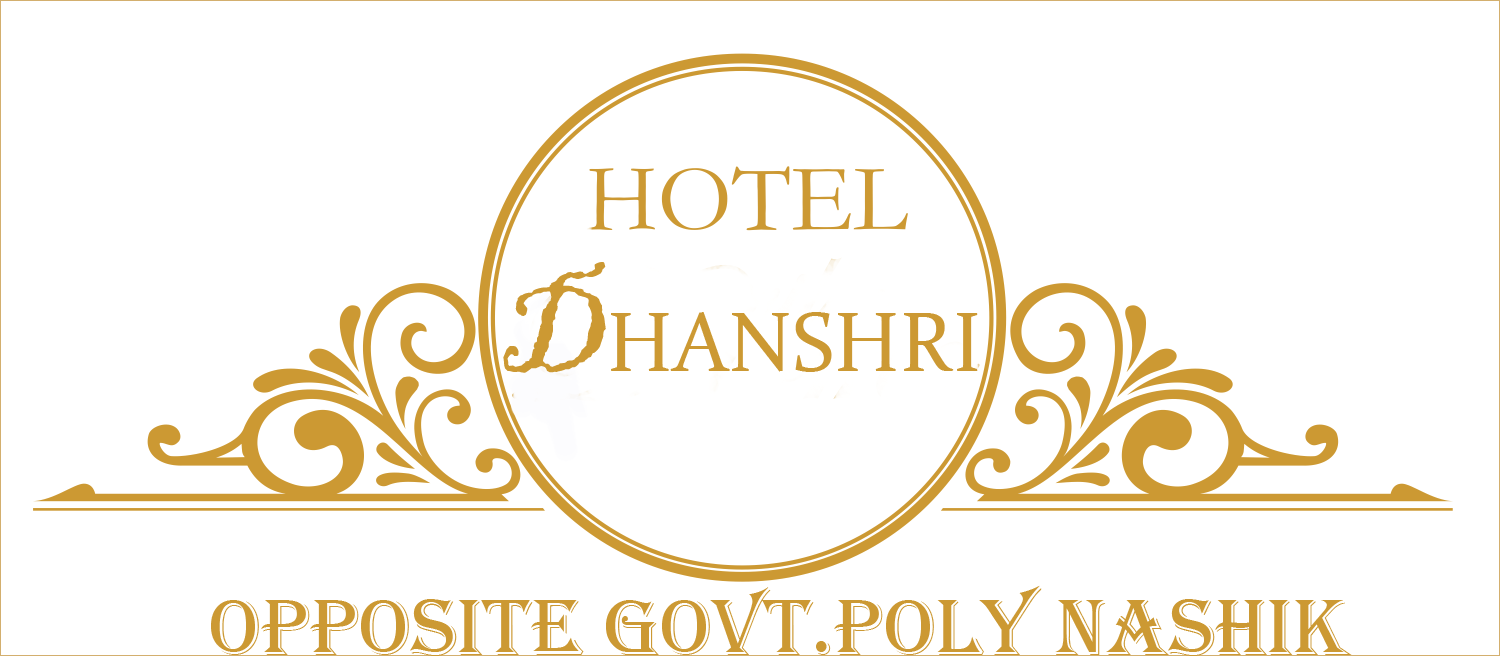
<style>
.page{position:relative;width:1500px;height:656px;background:#ffffff}
.page>*{position:absolute;margin:0}
.t1{font:83.3px "Constantia";color:#cc9933}
.t2{font:133.3px "BlackadderITC-Regular";color:#cc9933}
.t3{font:83.3px "Algerian";color:#cc9933}
</style>
<div class="page">
<p class="t1" style="left:503px;top:262px;width:475px;height:111px"><span class="t2">D</span>HANSHRI</p>
<p class="t3" style="left:211px;top:585px;width:1141px;height:71px">OPPOSITE GOVT.POLY NASHIK</p>
</div>
